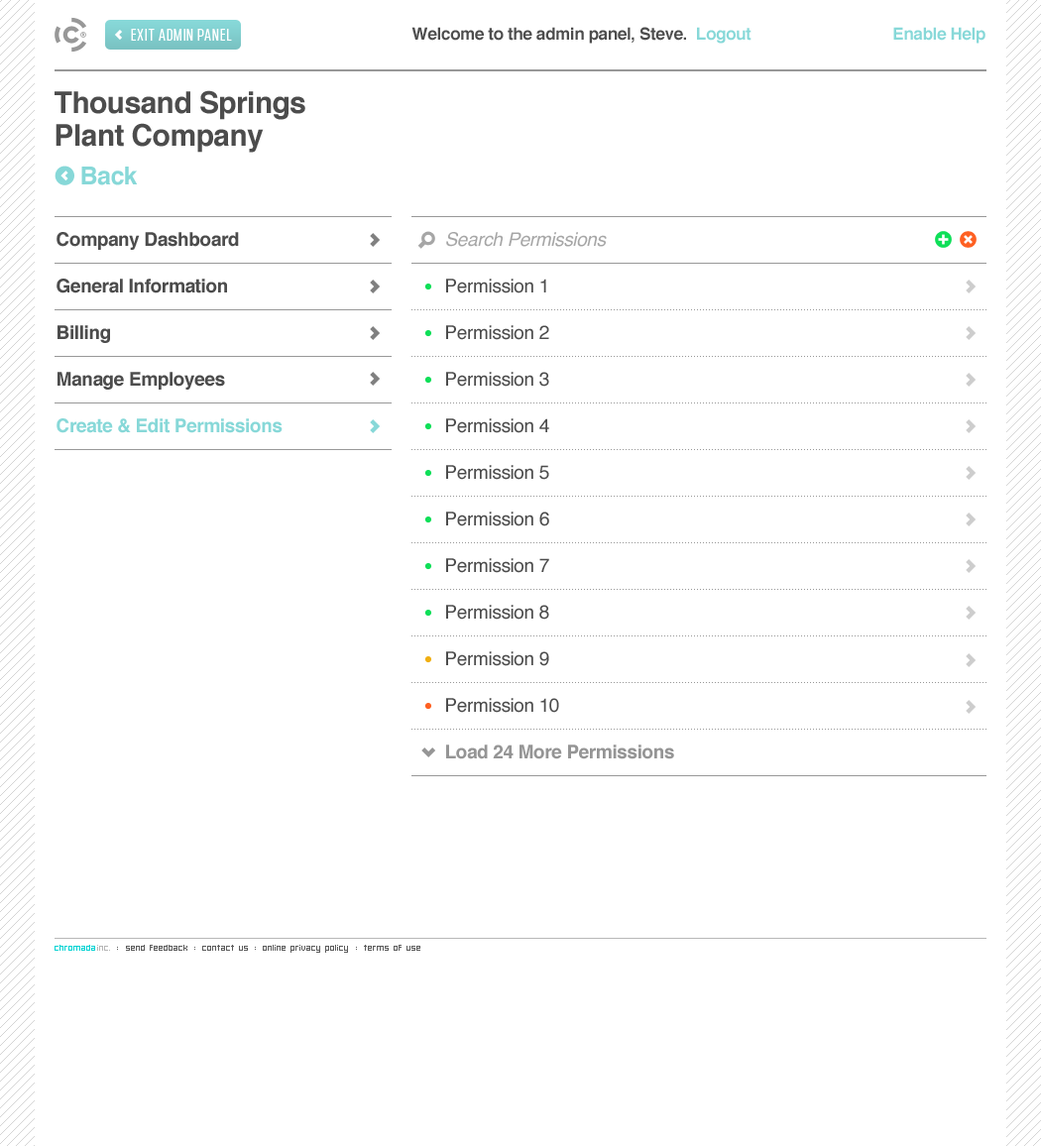
<style>
.page{position:relative;width:1041px;height:1146px;background:#ffffff}
.page>*{position:absolute;margin:0}
.t1{font:16.8px "ChromadicaCondensed";letter-spacing:0.06em;color:#ffffff}
.t2{font:16.8px "Helvetica-Bold";letter-spacing:-0.02em;color:#87d8d8}
.t3{font:16.8px "Helvetica-Bold";letter-spacing:-0.02em;color:#4c4c4c}
.t4{font:29.7px/32.7px "Helvetica-Bold";letter-spacing:-0.02em;color:#4c4c4c}
.t5{font:24.8px/38.7px "Helvetica-Bold";letter-spacing:-0.02em;color:#87d8d8}
.t6{font:18.8px/46.6px "Helvetica-Bold";letter-spacing:-0.02em;color:#4c4c4c}
.t7{font:18.8px/46.6px "Helvetica-Bold";letter-spacing:-0.02em;color:#87d8d8}
.t8{font:18.8px/46.6px "Helvetica";letter-spacing:-0.02em;color:#4c4c4c}
.t9{font:18.8px/46.6px "Helvetica-Oblique";letter-spacing:-0.02em;color:#a6a6a6}
.t10{font:18.8px/46.6px "Helvetica-Bold";letter-spacing:-0.02em;color:#959595}
.t11{font:7.9px "Hooge0655";color:#5b5b5b}
.t12{font:7.9px "Hooge0655";color:#00d3d3}
.t13{font:7.9px "Hooge0655";color:#b6b6b6}
.t14{font:7.9px "Hooge0655";color:#5b5b5b;text-transform:uppercase}
</style>
<div class="page">
<p class="t1" style="left:131px;top:29px;width:101px;height:12px">EXIT ADMIN PANEL</p>
<p class="t2" style="left:411px;top:27px;width:574px;height:17px"><span class="t3">Welcome to the admin panel, Steve.</span>  Logout                                 Enable Help</p>
<p class="t4" style="left:55px;top:90px;width:250px;height:95px">Thousand Springs <br>Plant Company<br><span class="t5">    Back</span></p>
<p class="t6" style="left:56px;top:232px;width:226px;height:201px">Company Dashboard<br>General Information<br>Billing<br>Manage Employees<br><span class="t7">Create &amp; Edit Permissions</span></p>
<p class="t8" style="left:446px;top:232px;width:228px;height:527px"><span class="t9">Search Permissions<br></span>Permission 1<br>Permission 2<br>Permission 3<br>Permission 4<br>Permission 5<br>Permission 6<br>Permission 7<br>Permission 8<br>Permission 9<br>Permission 10<br><span class="t10">Load 24 More Permissions</span></p>
<p class="t11" style="left:55px;top:945px;width:365px;height:8px"><span class="t12">chromada</span><span class="t13">inc. </span><span class="t14">: </span>send feedback <span class="t14">: </span>contact us <span class="t14">: </span>online privacy policy <span class="t14">: </span>terms of use</p>
</div>
